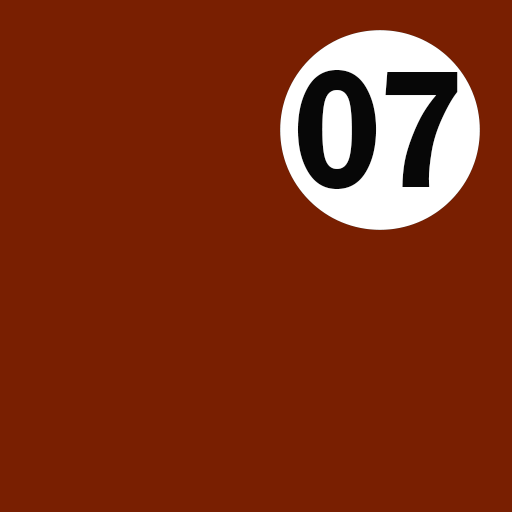
<style>
.page{position:relative;width:512px;height:512px;background:#791f01}
.page>*{position:absolute;margin:0}
.t1{font:172.5px "FranklinGothic-Demi";color:#070707;scale:0.87 1}
</style>
<div class="page">
<p class="t1" style="left:297px;top:70px;width:161px;height:119px">07</p>
</div>
